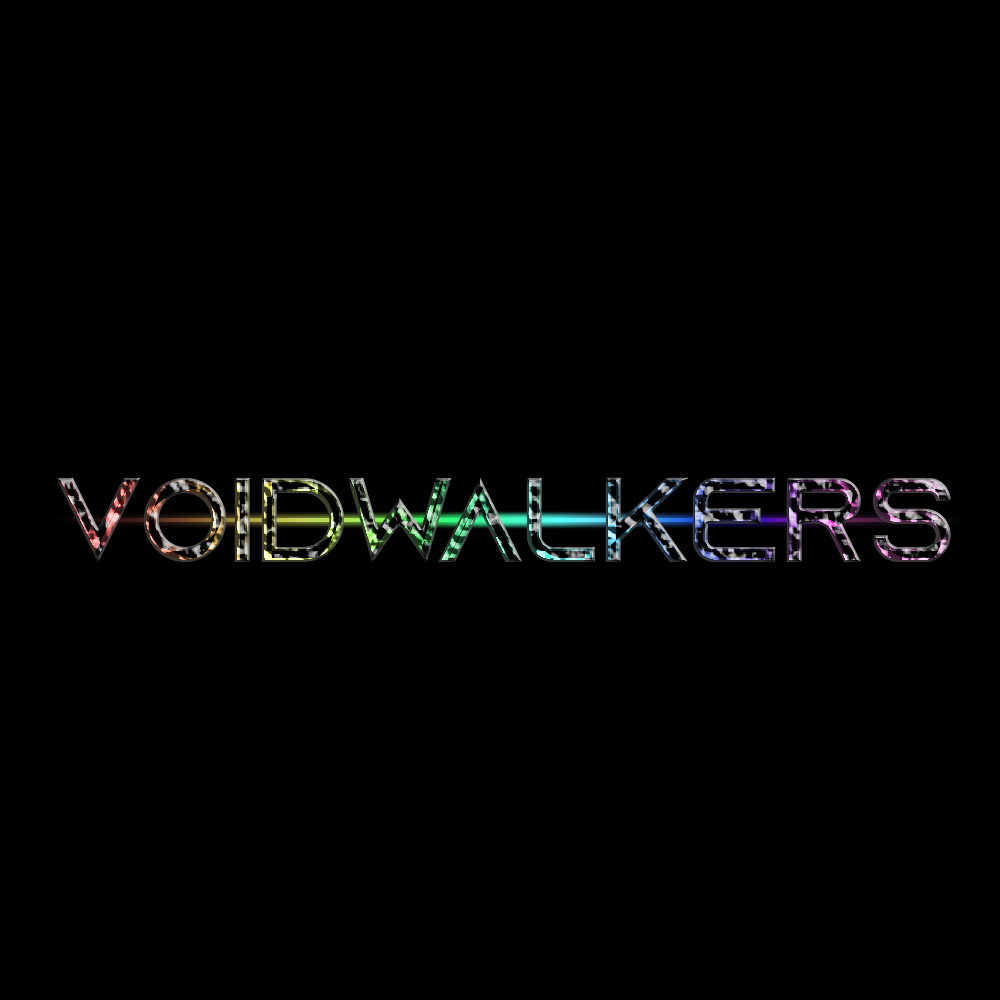
<style>
.page{position:relative;width:1000px;height:1000px;background:#000000}
.page>*{position:absolute;margin:0}
.t1{font:120px "AzonixRegular"}
</style>
<div class="page">
<p class="t1" style="left:56px;top:477px;width:895px;height:86px">VOIDWALKERS</p>
</div>
